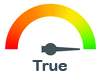
<style>
.page{position:relative;width:101px;height:72px;background:#ffffff}
.page>*{position:absolute;margin:0}
.t1{font:16px "ArialRoundedMTBold";color:#334855}
</style>
<div class="page">
<p class="t1" style="left:32px;top:60px;width:35px;height:11px">True</p>
</div>
